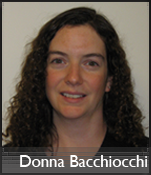
<style>
.page{position:relative;width:151px;height:175px}
.page>*{position:absolute;margin:0}
.t1{font:16.7px "GillSansMT";color:#fffefe}
</style>
<div class="page">
<p class="t1" style="left:20px;top:155px;width:127px;height:12px">Donna Bacchiocchi</p>
</div>
